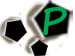
<style>
.page{position:relative;width:75px;height:56px;background:#ffffff}
.page>*{position:absolute;margin:0}
.t1{font:37.3px "SegoePrint-Bold";color:#00a754}
</style>
<div class="page">
<p class="t1" style="left:43px;top:7px;width:24px;height:28px">P</p>
</div>
